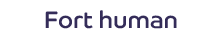
<style>
.page{position:relative;width:220px;height:40px;background:#ffffff}
.page>*{position:absolute;margin:0}
.t1{font:24px "CoHeadlineCorp-Regular";color:#342c59}
</style>
<div class="page">
<p class="t1" style="left:45px;top:10px;width:132px;height:19px">Fort human</p>
</div>
